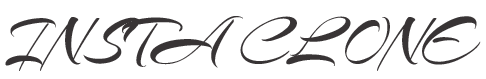
<style>
.page{position:relative;width:486px;height:79px;background:#ffffff}
.page>*{position:absolute;margin:0}
.t1{font:66.7px "Arizonia-Regular";color:#383435}
</style>
<div class="page">
<p class="t1" style="left:5px;top:16px;width:476px;height:55px">INSTA CLONE</p>
</div>
